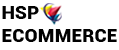
<style>
.page{position:relative;width:119px;height:50px;background:#ffffff}
.page>*{position:absolute;margin:0}
.t1{font:19.3px "Roboto-Black";color:#010101}
</style>
<div class="page">
<p class="t1" style="left:2px;top:6px;width:115px;height:36px">HSP<br>ECOMMERCE</p>
</div>
